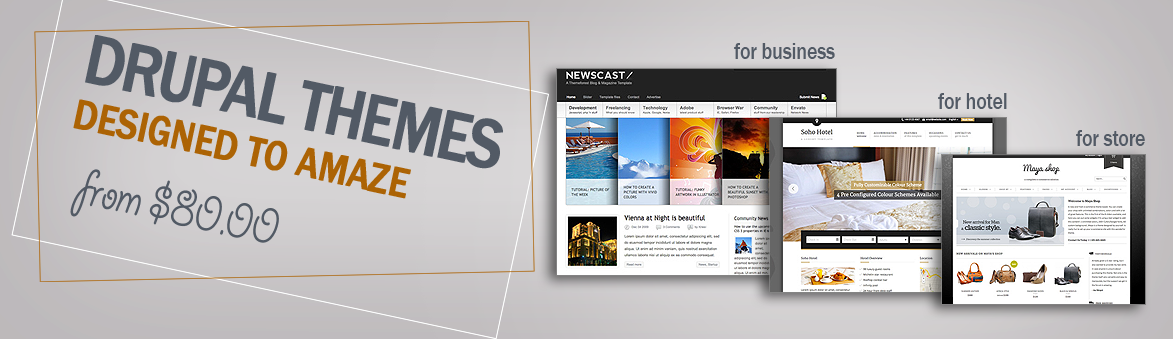
<style>
.page{position:relative;width:1173px;height:339px}
.page>*{position:absolute;margin:0}
.t1{font:72px "FranklinGothic-Medium";letter-spacing:-0.05em;color:#525a65;font-weight:bold;scale:0.83 1}
.t2{font:24px "FranklinGothic-Medium";letter-spacing:-0.01em;color:#525a65;scale:0.83 1}
.t3{font:43.2px "FranklinGothic-Medium";letter-spacing:-0.01em;color:#ac6304;font-weight:bold;scale:0.83 1}
.t4{font:57.6px "GiddyupStd";letter-spacing:-0.01em;color:#525a65;scale:0.83 1}
</style>
<div class="page">
<p class="t1" style="left:85px;top:35px;width:418px;height:134px;rotate:12deg">DRUPAL THEMES</p>
<p class="t2" style="left:734px;top:43px;width:101px;height:16px">for business</p>
<p class="t3" style="left:73px;top:99px;width:338px;height:100px;rotate:12deg">DESIGNED TO AMAZE</p>
<p class="t2" style="left:938px;top:93px;width:69px;height:16px">for hotel</p>
<p class="t2" style="left:1076px;top:130px;width:69px;height:16px">for store</p>
<p class="t4" style="left:70px;top:169px;width:209px;height:74px;rotate:12deg">from $80.00</p>
</div>
